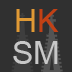
<style>
.page{position:relative;width:72px;height:72px;background:#303030}
.page>*{position:absolute;margin:0}
.t1{font:32px/32px "ArialMT";color:#c8c8c8}
.t2{font:32px/32px "ArialMT";color:#e09a35}
.t3{font:32px/32px "ArialMT";color:#c24114}
</style>
<div class="page">
<p class="t1" style="left:13px;top:9px;width:46px;height:55px;text-align:center"><span class="t2">H</span><span class="t3">K<br></span>SM</p>
</div>
